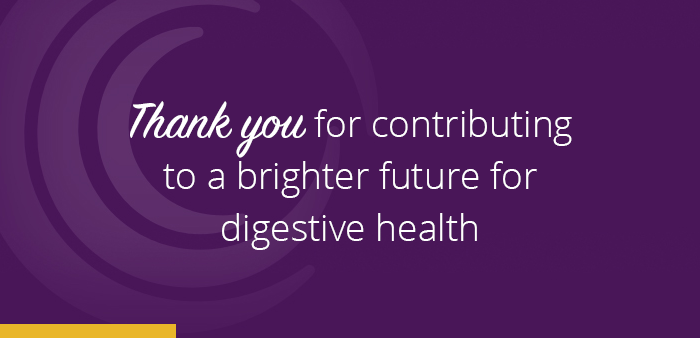
<style>
.page{position:relative;width:700px;height:338px;background:#491658}
.page>*{position:absolute;margin:0}
.t1{font:37px/52.2px "OpenSans-Light";color:#ffffff}
.t2{font:55px/52.2px "SignPainter-HouseScript";color:#ffffff}
</style>
<div class="page">
<p class="t1" style="left:130px;top:101px;width:442px;height:149px;text-align:center"><span class="t2">Thank you</span> for contributing to a brighter future for digestive health</p>
</div>
